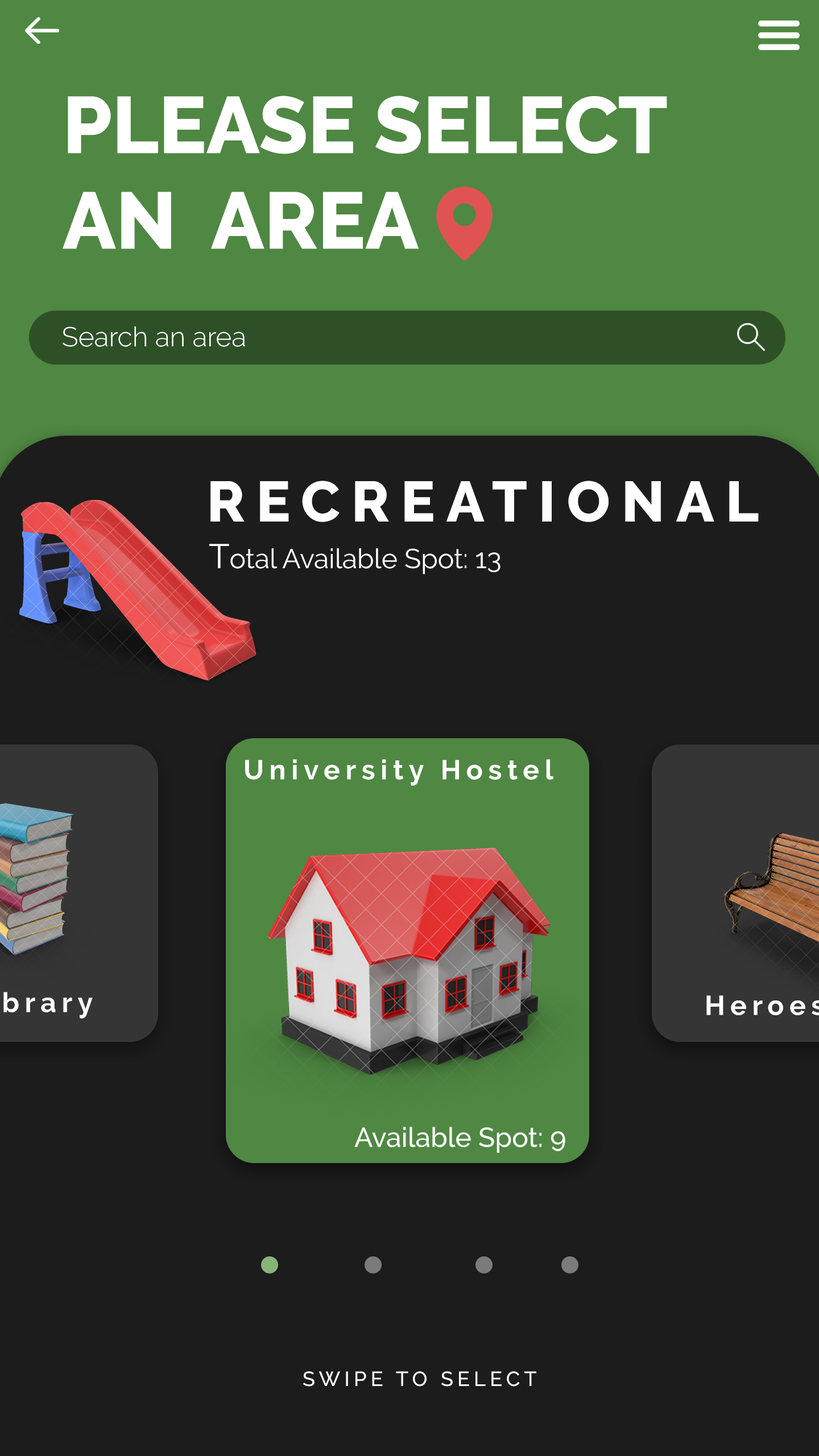
<style>
.page{position:relative;width:819px;height:1456px;background:#1c1c1c}
.page>*{position:absolute;margin:0}
.t1{font:79.6px "Raleway-ExtraBold";color:#ffffff}
.t2{font:27.3px "Raleway-Light";color:#ffffff}
.t3{font:56.9px "Raleway-ExtraBold";letter-spacing:0.2em;color:#ffffff}
.t4{font:27.3px "Raleway-Regular";color:#ffffff}
.t5{font:34.1px "Raleway-Regular";color:#ffffff}
.t6{font:27.3px "Raleway-Bold";letter-spacing:0.2em;color:#ffffff}
.t7{font:27.3px "Raleway-Medium";color:#ffffff}
.t8{font:20.5px "Raleway-Medium";letter-spacing:0.2em;color:#ffffff}
</style>
<div class="page">
<p class="t1" style="left:63px;top:96px;width:604px;height:153px">PLEASE SELECT <br>AN  AREA</p>
<p class="t2" style="left:63px;top:326px;width:182px;height:21px">Search an area</p>
<p class="t3" style="left:210px;top:481px;width:549px;height:41px">RECREATIONAL</p>
<p class="t4" style="left:209px;top:544px;width:291px;height:30px"><span class="t5">T</span>otal Available Spot: 13</p>
<p class="t6" style="left:245px;top:759px;width:308px;height:27px">University Hostel</p>
<p class="t7" style="left:354px;top:1127px;width:211px;height:26px">Available Spot: 9</p>
<p class="t8" style="left:303px;top:1371px;width:233px;height:16px">SWIPE TO SELECT</p>
</div>
